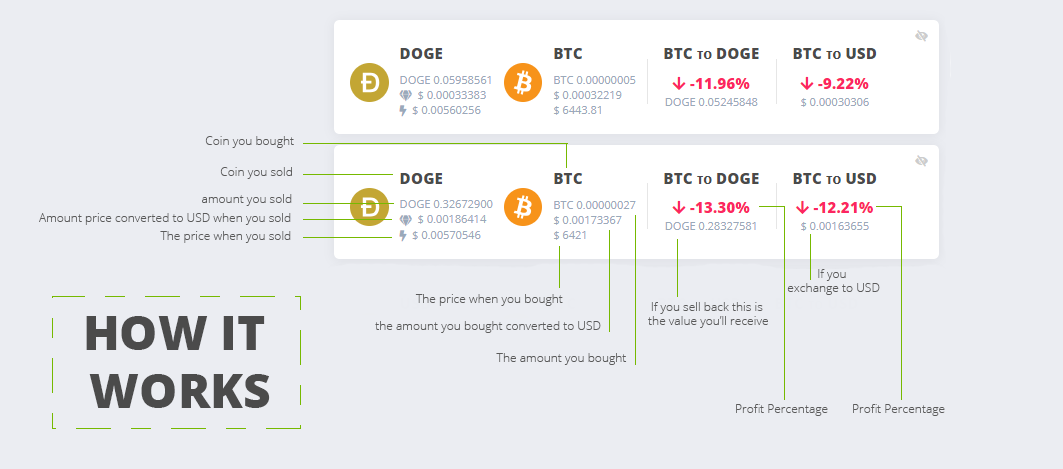
<style>
.page{position:relative;width:1063px;height:469px;background:#ebedf2}
.page>*{position:absolute;margin:0}
.t1{font:12px "OpenSans-Light";color:#5a5a5a}
.t2{font:48px "OpenSans-Extrabold";color:#4b4b4b}
</style>
<div class="page">
<p class="t1" style="left:205px;top:136px;width:89px;height:12px">Coin you bought</p>
<p class="t1" style="left:220px;top:167px;width:72px;height:12px">Coin you sold</p>
<p class="t1" style="left:202px;top:194px;width:90px;height:12px">amount you sold</p>
<p class="t1" style="left:39px;top:213px;width:252px;height:12px">Amount price converted to USD when you sold</p>
<p class="t1" style="left:160px;top:231px;width:131px;height:12px">The price when you sold</p>
<p class="t1" style="left:787px;top:269px;width:93px;height:26px;text-align:center">If you <br>exchange to USD</p>
<p class="t1" style="left:415px;top:294px;width:148px;height:12px">The price when you bought</p>
<p class="t1" style="left:648px;top:302px;width:120px;height:26px;text-align:center">If you sell back this is <br>the value you’ll receive</p>
<p class="t2" style="left:86px;top:316px;width:184px;height:92px;text-align:center">HOW IT <br>WORKS</p>
<p class="t1" style="left:375px;top:321px;width:226px;height:12px">the amount you bought converted to USD</p>
<p class="t1" style="left:496px;top:353px;width:131px;height:12px">The amount you bought</p>
<p class="t1" style="left:736px;top:404px;width:92px;height:12px">Profit Percentage</p>
<p class="t1" style="left:853px;top:404px;width:92px;height:12px">Profit Percentage</p>
</div>
